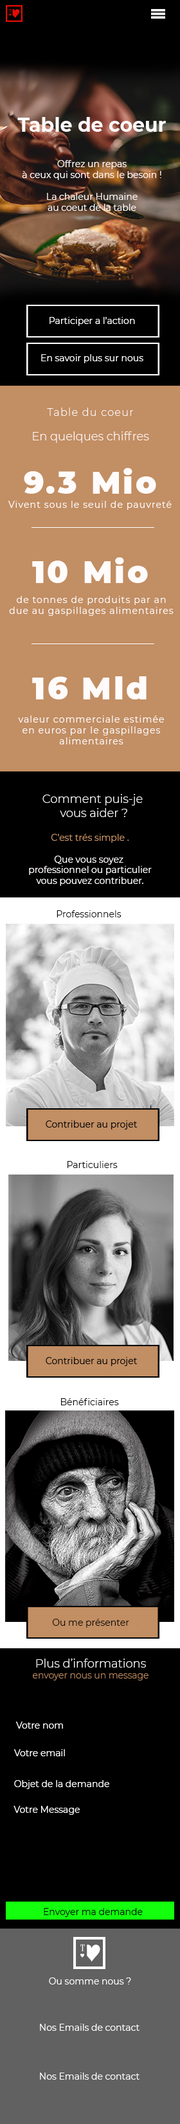
<style>
.page{position:relative;width:180px;height:2124px;background:#000000}
.page>*{position:absolute;margin:0}
.t1{font:9px "Montserrat-Regular";color:#fffbfb}
.t2{font:19.3px "Montserrat-Bold";color:#fffbfb}
.t3{font:11.6px "Montserrat-Light";color:#fffbfb}
.t4{font:10.3px "Montserrat-Light";letter-spacing:0.08em;color:#fffbfb}
.t5{font:30.9px "Montserrat-Black";letter-spacing:0.08em;color:#fffbfb}
.t6{font:9px "Montserrat-Regular";letter-spacing:0.08em;color:#fffbfb}
.t7{font:9px "Montserrat-Regular";color:#c28e63}
.t8{font:9px "Montserrat-Regular";color:#0a0a0a}
.t9{font:9px "Montserrat-Light";color:#c28e63}
.t10{font:9px "Montserrat-Regular";color:#ffffff}
.t11{font:9px "Montserrat-Regular";color:#000000}
</style>
<div class="page">
<p class="t1" style="left:17px;top:117px;width:149px;height:94px;text-align:center"><span class="t2">Table de coeur<br><br><br></span>Offrez un repas <br>à ceux qui sont dans le besoin !<br><br>La chaleur Humaine<br>au coeut de la table</p>
<p class="t1" style="left:50px;top:317px;width:85px;height:9px">Participer a l’action</p>
<p class="t1" style="left:41px;top:354px;width:102px;height:9px">En savoir plus sur nous</p>
<p class="t3" style="left:33px;top:408px;width:116px;height:35px;text-align:center"><span class="t4">Table du coeur<br><br></span>En quelques chiffres</p>
<p class="t5" style="left:24px;top:468px;width:132px;height:26px">9.3 Mio</p>
<p class="t6" style="left:8px;top:501px;width:164px;height:9px">Vivent sous le seuil de pauvreté</p>
<p class="t5" style="left:32px;top:557px;width:116px;height:26px">10 Mio</p>
<p class="t6" style="left:9px;top:596px;width:165px;height:20px;text-align:center">de tonnes de produits par an<br>due au gaspillages alimentaires</p>
<p class="t5" style="left:32px;top:676px;width:115px;height:23px">16 Mld</p>
<p class="t6" style="left:18px;top:716px;width:146px;height:28px;text-align:center">valeur commerciale estimée<br>en euros par le gaspillages<br>alimentaires</p>
<p class="t3" style="left:42px;top:794px;width:101px;height:23px;text-align:center">Comment puis-je<br> vous aider ?</p>
<p class="t1" style="left:29px;top:834px;width:123px;height:52px;text-align:center"><span class="t7">C’est trés simple .<br></span><br>Que vous soyez <br>professionnel ou particulier<br>vous pouvez contribuer.</p>
<p class="t8" style="left:57px;top:910px;width:65px;height:7px">Professionnels</p>
<p class="t8" style="left:68px;top:1161px;width:50px;height:7px">Particuliers</p>
<p class="t8" style="left:61px;top:1398px;width:58px;height:7px">Bénéficiaires</p>
<p class="t8" style="left:52px;top:1619px;width:77px;height:9px">Ou me présenter</p>
<p class="t9" style="left:33px;top:1659px;width:115px;height:21px;text-align:center"><span class="t3">Plus d’informations<br></span>envoyer nous un message</p>
<p class="t10" style="left:15px;top:1722px;width:48px;height:7px">Votre nom</p>
<p class="t10" style="left:14px;top:1749px;width:51px;height:7px">Votre email</p>
<p class="t10" style="left:14px;top:1780px;width:95px;height:9px">Objet de la demande</p>
<p class="t10" style="left:14px;top:1806px;width:66px;height:9px">Votre Message</p>
<p class="t11" style="left:44px;top:1908px;width:99px;height:9px">Envoyer ma demande</p>
<p class="t10" style="left:49px;top:1977px;width:82px;height:8px">Ou somme nous ?</p>
<p class="t10" style="left:40px;top:2024px;width:100px;height:7px">Nos Emails de contact</p>
<p class="t10" style="left:40px;top:2073px;width:100px;height:7px">Nos Emails de contact</p>
</div>
